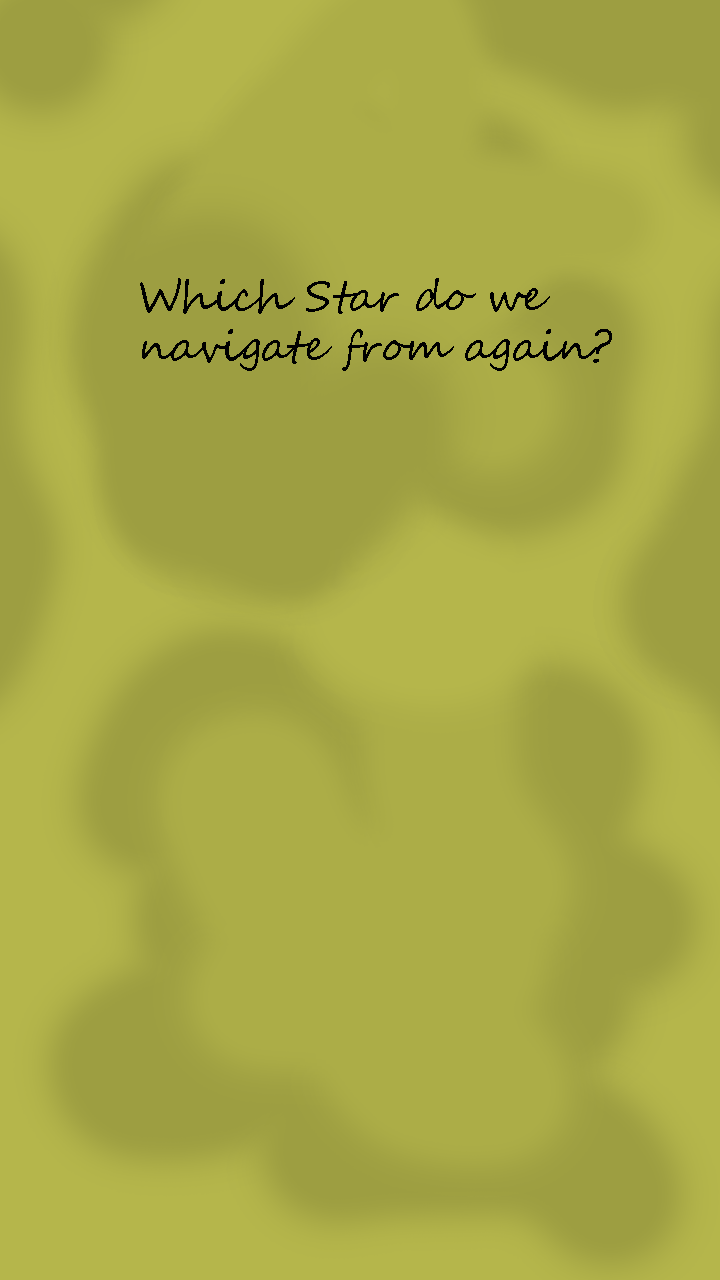
<style>
.page{position:relative;width:720px;height:1280px;background:#acad47}
.page>*{position:absolute;margin:0}
.t1{font:41.7px "SegoeScript";color:#000000}
</style>
<div class="page">
<p class="t1" style="left:140px;top:278px;width:472px;height:93px">Which Star do we<br>navigate from again?</p>
</div>
